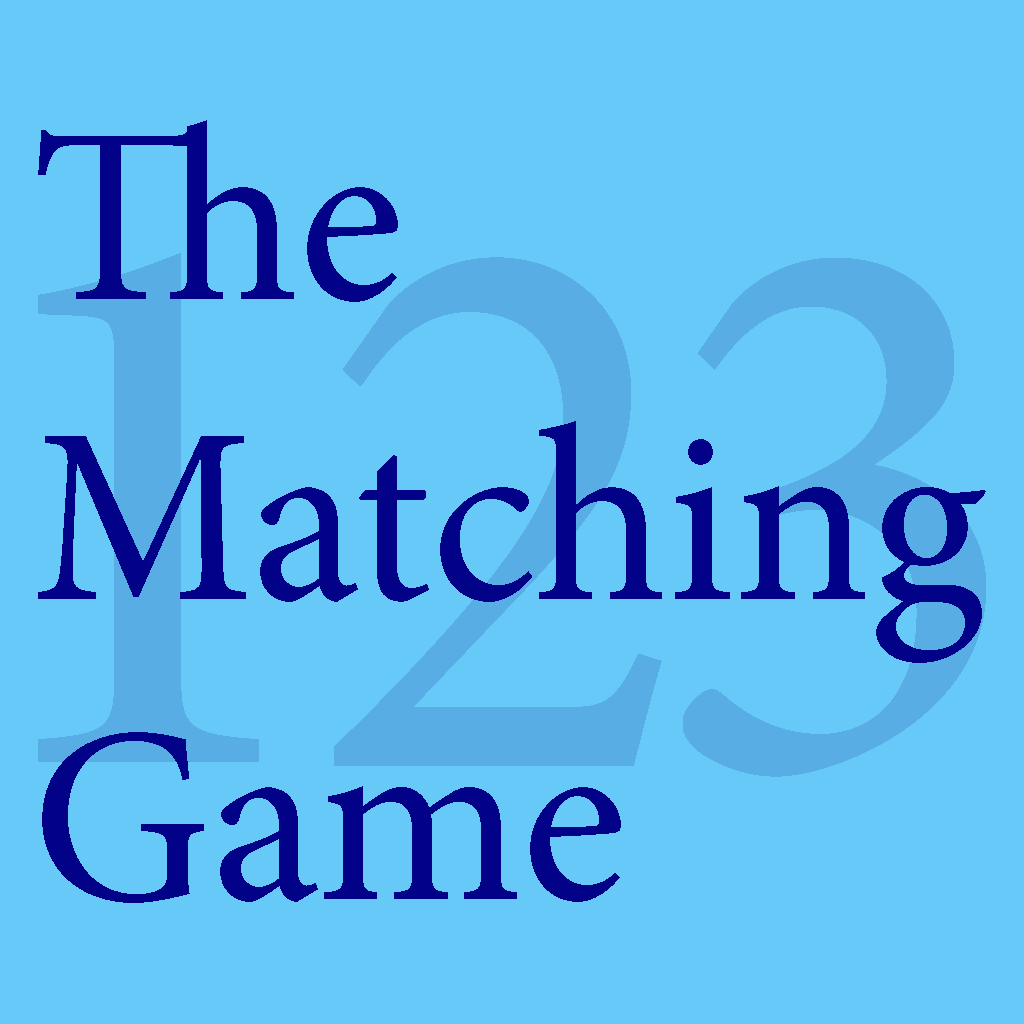
<style>
.page{position:relative;width:1024px;height:1024px;background:#66c9f7}
.page>*{position:absolute;margin:0}
.t1{font:250px "MinionPro-Regular";color:#020288}
</style>
<div class="page">
<p class="t1" style="left:38px;top:120px;width:948px;height:783px">The<br>Matching<br>Game</p>
</div>
